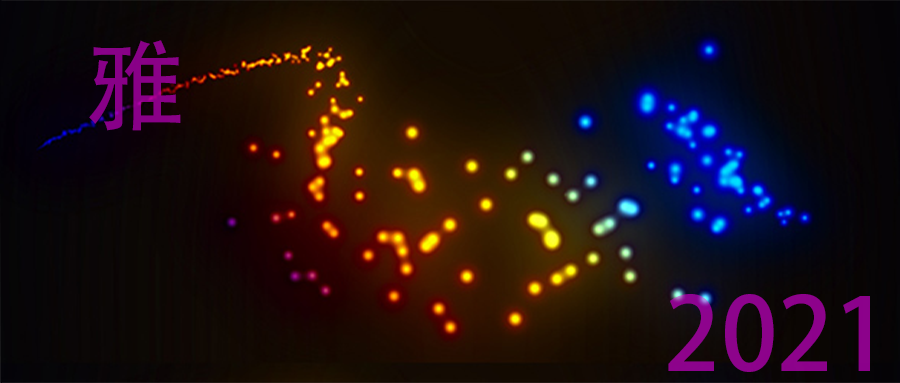
<style>
.page{position:relative;width:900px;height:383px}
.page>*{position:absolute;margin:0}
.t1{font:100px "AdobeHeitiStd-Regular";color:#890087}
.t2{font:100px "AdobeHeitiStd-Regular";color:#8d038b}
</style>
<div class="page">
<p class="t1" style="left:89px;top:40px;width:92px;height:91px">雅</p>
<p class="t2" style="left:668px;top:294px;width:202px;height:78px">2021</p>
</div>
